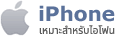
<style>
.page{position:relative;width:117px;height:38px;background:#ffffff}
.page>*{position:absolute;margin:0}
.t1{font:10.3px "NotoSansThai-Regular";color:#5c5c5c}
</style>
<div class="page">
<p class="t1" style="left:39px;top:25px;width:76px;height:9px">เหมาะสำหรับไอโฟน</p>
</div>
